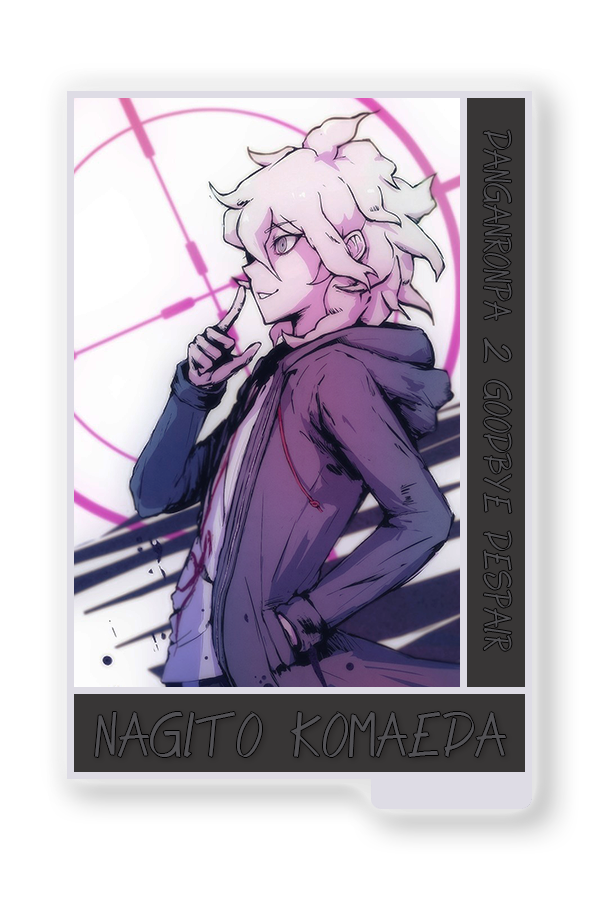
<style>
.page{position:relative;width:600px;height:900px;background:#ffffff}
.page>*{position:absolute;margin:0}
.t1{font:34.2px "AlphaThin";color:#4a494e}
.t2{font:56px "AlphaThin";color:#4a494e}
</style>
<div class="page">
<p class="t1" style="left:483px;top:130px;width:29px;height:521px;rotate:90deg">DANGANRONPA 2 GOODBYE DESPAIR</p>
<p class="t2" style="left:95px;top:712px;width:411px;height:45px">NAGITO KOMAEDA</p>
</div>
